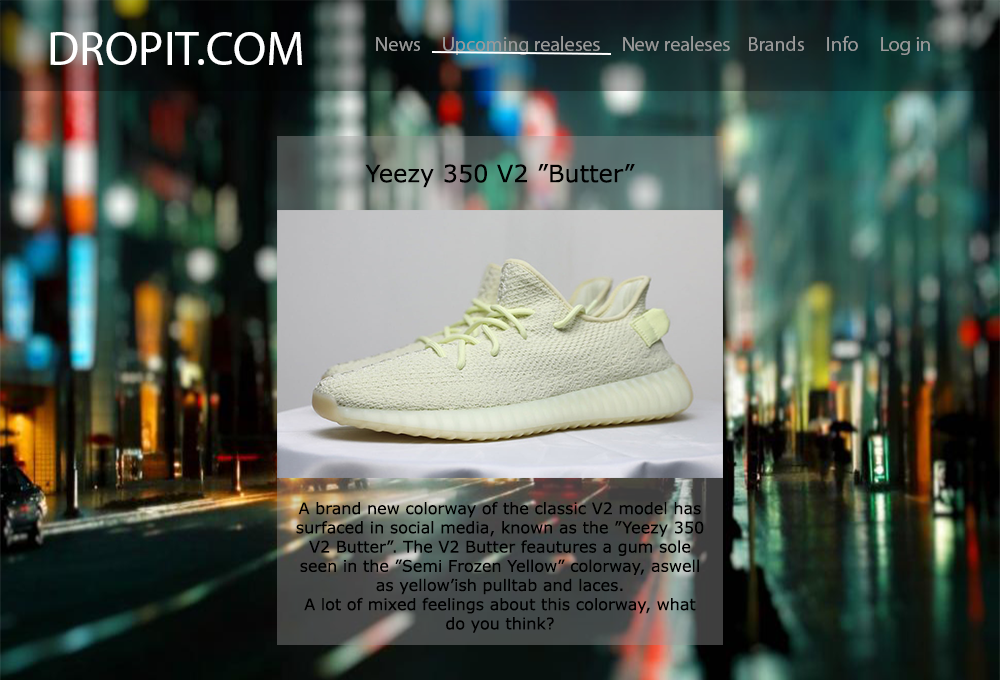
<style>
.page{position:relative;width:1000px;height:680px}
.page>*{position:absolute;margin:0}
.t1{font:48px "MyriadPro-Regular";color:#ffffff}
.t2{font:20px "MyriadPro-Regular";color:#848484}
.t3{font:24px "MSReferenceSansSerif";color:#000000}
.t4{font:16px "MSReferenceSansSerif";color:#000000}
</style>
<div class="page">
<p class="t1" style="left:50px;top:32px;width:252px;height:33px">DROPIT.COM</p>
<p class="t2" style="left:376px;top:36px;width:554px;height:19px">News     Upcoming realeses     New realeses    Brands     Info     Log in</p>
<p class="t3" style="left:365px;top:164px;width:270px;height:24px">Yeezy 350 V2 ”Butter”</p>
<p class="t4" style="left:296px;top:501px;width:408px;height:132px;text-align:center">A brand new colorway of the classic V2 model has surfaced in social media, known as the ”Yeezy 350 V2 Butter”. The V2 Butter feautures a gum sole seen in the ”Semi Frozen Yellow” colorway, aswell as yellow’ish pulltab and laces. <br>A lot of mixed feelings about this colorway, what do you think?</p>
</div>
